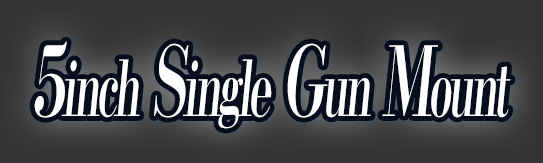
<style>
.page{position:relative;width:543px;height:163px}
.page>*{position:absolute;margin:0}
.t1{font:76.8px "KochoStd-Heavy";letter-spacing:-0.08em;color:#ffffff;font-style:italic;scale:0.56 1}
.t2{font:96px "KochoStd-Heavy";letter-spacing:-0.08em;color:#ffffff;font-style:italic;scale:0.56 1}
</style>
<div class="page">
<p class="t1" style="left:34px;top:41px;width:477px;height:88px"><span class="t2">5</span>inch<span class="t2"> S</span>ingle<span class="t2"> G</span>un<span class="t2"> M</span>ount</p>
</div>
